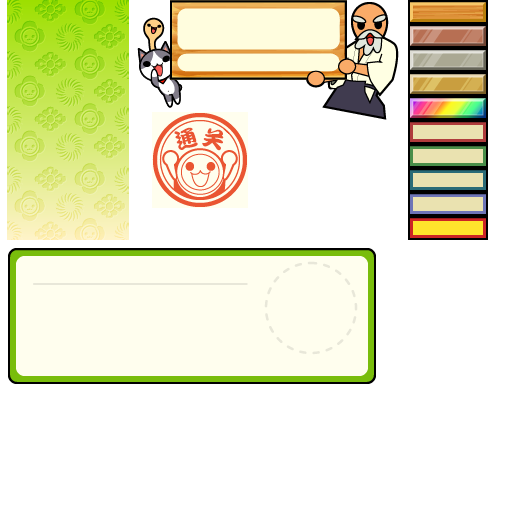
<style>
.page{position:relative;width:512px;height:512px;background:#ffffff}
.page>*{position:absolute;margin:0}
.t1{font:22px "DFPKanTingLiuW9";color:#ea5532}
</style>
<div class="page">
<p class="t1" style="left:174px;top:127px;width:24px;height:23px;rotate:-15deg">通</p>
<p class="t1" style="left:202px;top:128px;width:22px;height:23px;rotate:15deg">关</p>
</div>
